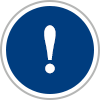
<style>
.page{position:relative;width:100px;height:100px;background:#003d7f}
.page>*{position:absolute;margin:0}
.t1{font:75px "KannadaMN-Bold";letter-spacing:-0.01em;color:#ffffff}
</style>
<div class="page">
<p class="t1" style="left:44px;top:25px;width:12px;height:49px">!</p>
</div>
